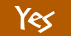
<style>
.page{position:relative;width:71px;height:36px;background:#b35a00}
.page>*{position:absolute;margin:0}
.t1{font:40px "Screwball";color:#ffffff}
</style>
<div class="page">
<p class="t1" style="left:14px;top:6px;width:41px;height:27px">Yes</p>
</div>
